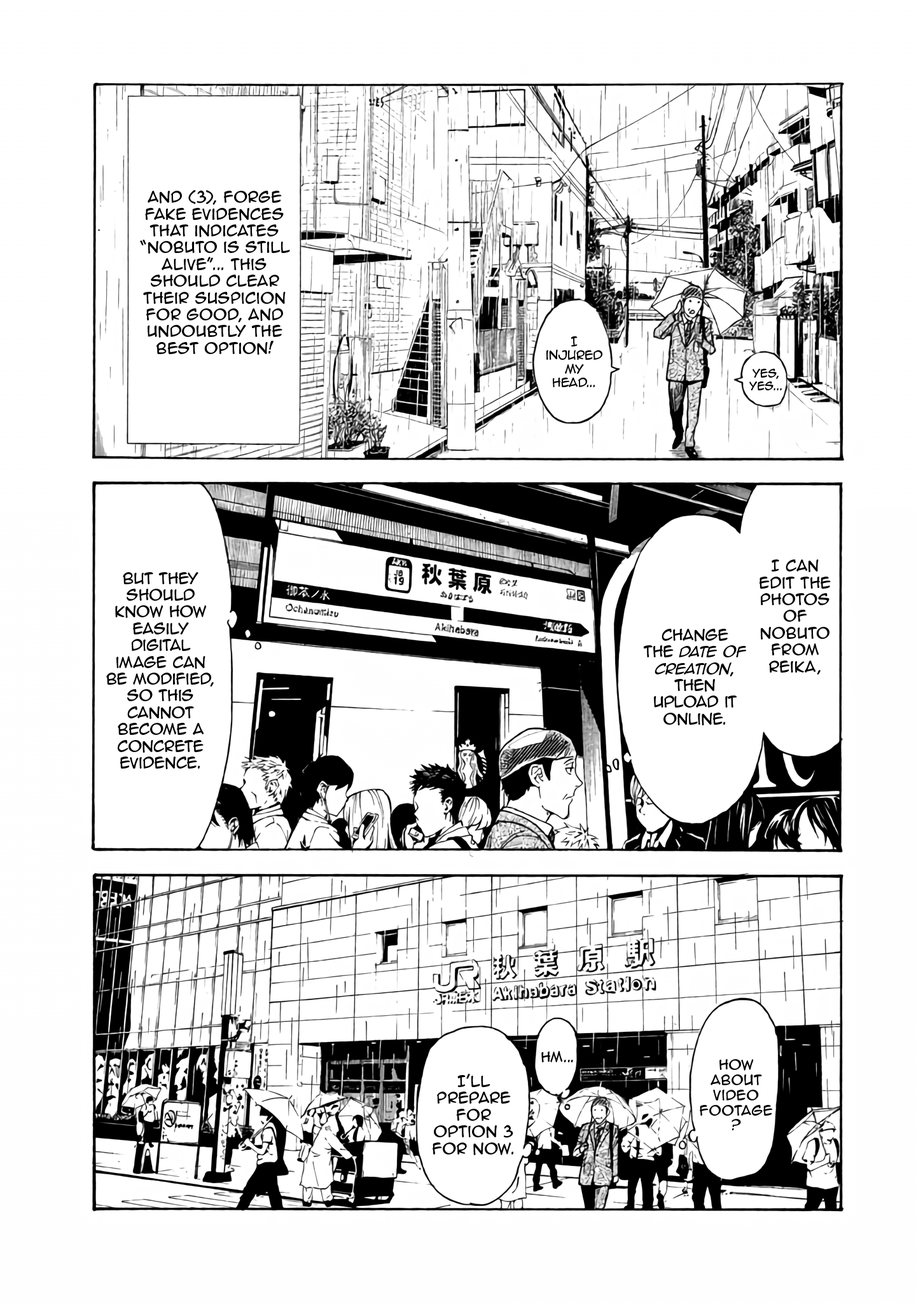
<style>
.page{position:relative;width:916px;height:1302px;background:#ffffff}
.page>*{position:absolute;margin:0}
.t1{font:14px "AnimeAce2.0BB";color:#000000}
.t2{font:11.4px "AnimeAce2.0BB";color:#000000}
.t3{font:10.2px "AnimeAce2.0BB";color:#000000}
.t4{font:14px "AnimeAce2.0BB-Italic";color:#000000}
.t5{font:12.7px "AnimeAce2.0BB";color:#000000}
</style>
<div class="page">
<p class="t1" style="left:140px;top:190px;width:150px;height:165px;text-align:center">and (3), forge fake evidences that indicates “Nobuto is still alive”... This should clear their suspicion for good, and undoubtly the best option!</p>
<p class="t2" style="left:546px;top:336px;width:56px;height:51px;text-align:center">I  injured my head...</p>
<p class="t3" style="left:749px;top:369px;width:32px;height:21px;text-align:center">yes, yes...</p>
<p class="t1" style="left:759px;top:560px;width:71px;height:115px;text-align:center">I can edit the photos of  nobuto from reika,</p>
<p class="t1" style="left:106px;top:572px;width:108px;height:197px;text-align:center">BUt they should know how easily digital image can be modified, so this cannot become a concrete evidence.</p>
<p class="t1" style="left:643px;top:629px;width:103px;height:97px;text-align:center">change <br>the <span class="t4">date of creation</span>, then upload it online.</p>
<p class="t5" style="left:541px;top:1051px;width:32px;height:12px">hm...</p>
<p class="t5" style="left:699px;top:1059px;width:74px;height:72px;text-align:center">how about video footage<br>?</p>
<p class="t1" style="left:432px;top:1074px;width:82px;height:81px;text-align:center">I’ll prepare for option 3 for now.</p>
</div>
